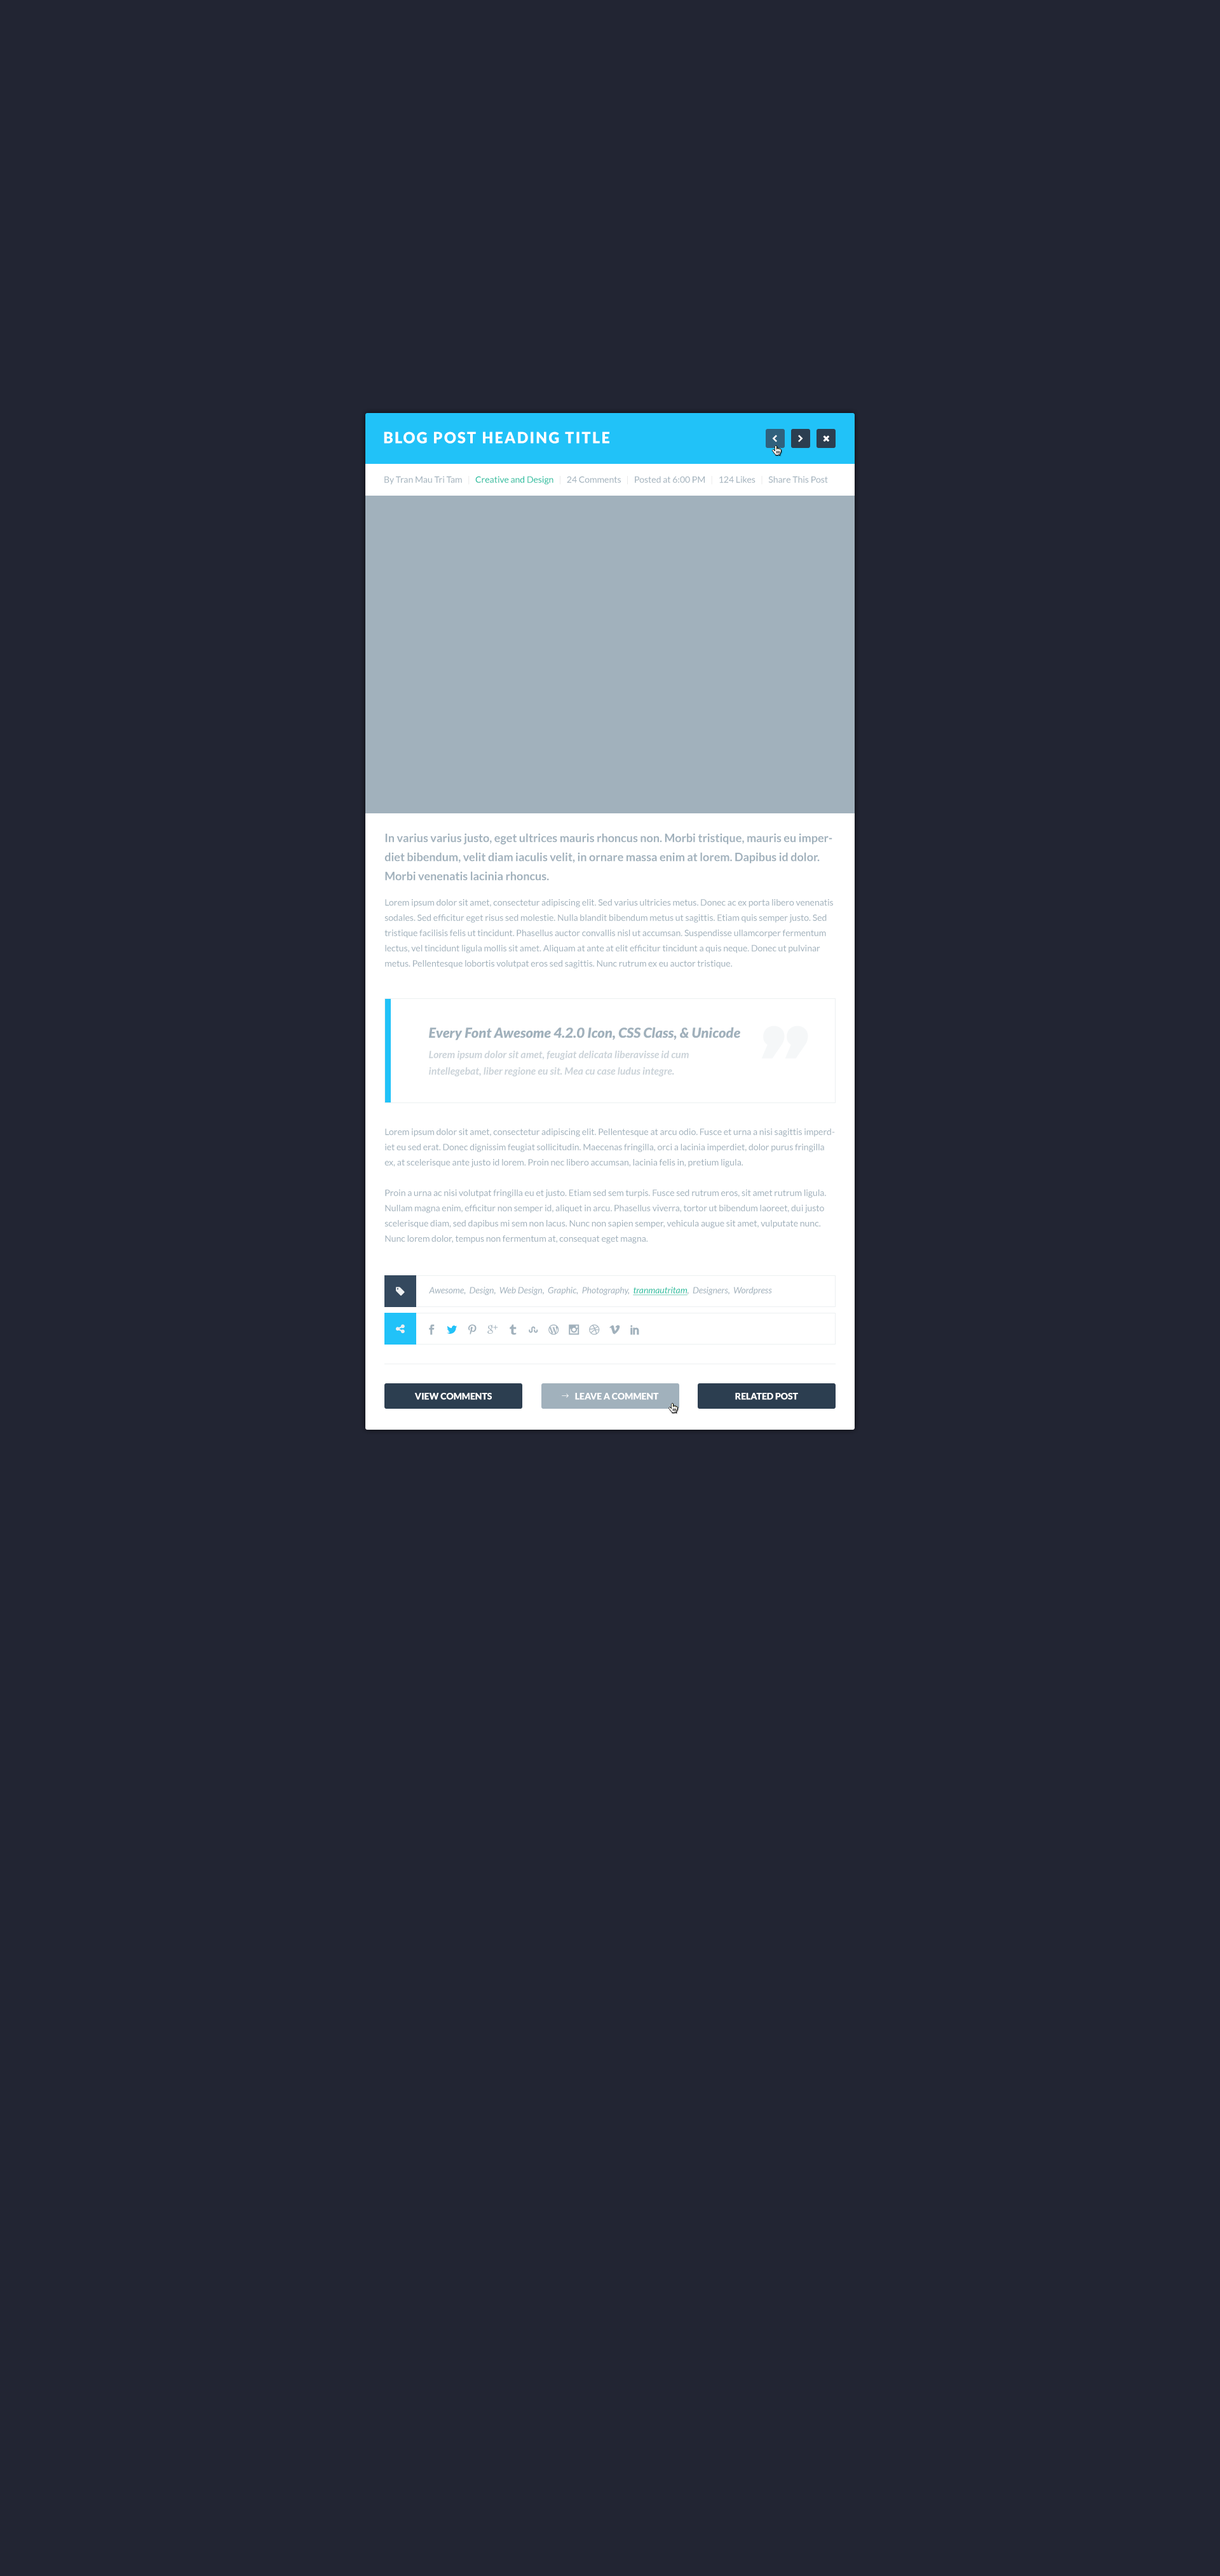
<style>
.page{position:relative;width:1220px;height:2576px;background:#222533}
.page>*{position:absolute;margin:0}
.t1{font:15.3px "Lato-Black";letter-spacing:0.1em;color:#ffffff;text-transform:uppercase}
.t2{font:8.9px "Lato-Regular";color:#a1b1bc}
.t3{font:8.9px "Lato-Regular";color:#ebebeb}
.t4{font:8.9px "Lato-Regular";color:#1abc9c}
.t5{font:11.4px/19.1px "Lato-Bold";color:#a1b1bc}
.t6{font:8.9px/15.3px "Lato-Regular";color:#a1b1bc}
.t7{font:14px "Lato-BlackItalic";color:#a1b1bc}
.t8{font:10.2px/16.5px "Lato-BoldItalic";color:#cad2d8}
.t9{font:8.9px "Lato-Italic";color:#a1b1bc}
.t10{font:8.9px "Lato-Italic";color:#1abc9c;text-decoration:underline}
.t11{font:8.9px "Lato-Black";color:#ffffff}
</style>
<div class="page">
<p class="t1" style="left:384px;top:431px;width:225px;height:13px">Blog Post Heading Title</p>
<p class="t2" style="left:384px;top:476px;width:444px;height:9px">By Tran Mau Tri Tam<span class="t3">   |   </span><span class="t4">Creative and Design</span><span class="t3">   |   </span>24 Comments<span class="t3">   |   </span>Posted at 6:00 PM<span class="t3">   |   </span>124 Likes<span class="t3">   |   </span>Share This Post</p>
<p class="t5" style="left:384px;top:833px;width:448px;height:48px">In varius varius justo, eget ultrices mauris rhoncus non. Morbi tristique, mauris eu imperdiet bibendum, velit diam iaculis velit, in ornare massa enim at lorem. Dapibus id dolor. Morbi venenatis lacinia rhoncus.</p>
<p class="t6" style="left:384px;top:899px;width:449px;height:69px">Lorem ipsum dolor sit amet, consectetur adipiscing elit. Sed varius ultricies metus. Donec ac ex porta libero venenatis sodales. Sed efficitur eget risus sed molestie. Nulla blandit bibendum metus ut sagittis. Etiam quis semper justo. Sed tristique facilisis felis ut tincidunt. Phasellus auctor convallis nisl ut accumsan. Suspendisse ullamcorper fermentum lectus, vel tincidunt ligula mollis sit amet. Aliquam at ante at elit efficitur tincidunt a quis neque. Donec ut pulvinar metus. Pellentesque lobortis volutpat eros sed sagittis. Nunc rutrum ex eu auctor tristique.</p>
<p class="t7" style="left:429px;top:1027px;width:311px;height:13px">Every Font Awesome 4.2.0 Icon, CSS Class, &amp; Unicode</p>
<p class="t8" style="left:429px;top:1050px;width:260px;height:26px">Lorem ipsum dolor sit amet, feugiat delicata liberavisse id cum<br>intellegebat, liber regione eu sit. Mea cu case ludus integre.</p>
<p class="t6" style="left:384px;top:1129px;width:451px;height:115px">Lorem ipsum dolor sit amet, consectetur adipiscing elit. Pellentesque at arcu odio. Fusce et urna a nisi sagittis imperdiet eu sed erat. Donec dignissim feugiat sollicitudin. Maecenas fringilla, orci a lacinia imperdiet, dolor purus fringilla ex, at scelerisque ante justo id lorem. Proin nec libero accumsan, lacinia felis in, pretium ligula. <br><br>Proin a urna ac nisi volutpat fringilla eu et justo. Etiam sed sem turpis. Fusce sed rutrum eros, sit amet rutrum ligula. Nullam magna enim, efficitur non semper id, aliquet in arcu. Phasellus viverra, tortor ut bibendum laoreet, dui justo scelerisque diam, sed dapibus mi sem non lacus. Nunc non sapien semper, vehicula augue sit amet, vulputate nunc. Nunc lorem dolor, tempus non fermentum at, consequat eget magna.</p>
<p class="t9" style="left:429px;top:1287px;width:343px;height:9px">Awesome,  Design,  Web Design,  Graphic,  Photography,  <span class="t10">tranmautritam</span>,  Designers,  Wordpress</p>
<p class="t11" style="left:414px;top:1393px;width:78px;height:7px">VIEW COMMENTS</p>
<p class="t11" style="left:575px;top:1393px;width:84px;height:7px">LEAVE A COMMENT</p>
<p class="t11" style="left:735px;top:1393px;width:63px;height:7px">RELATED POST</p>
</div>
